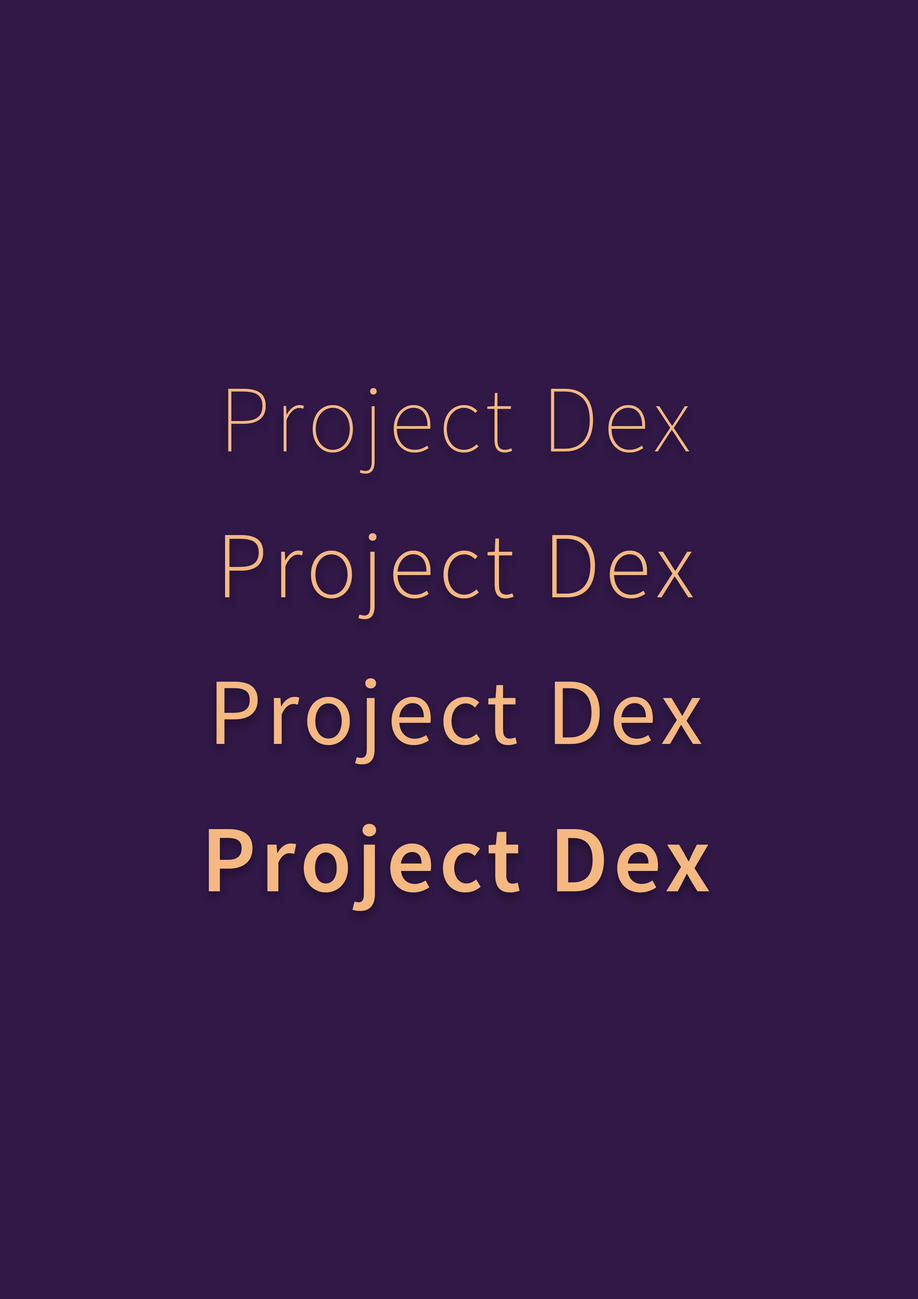
<style>
.page{position:relative;width:918px;height:1299px;background:#311847}
.page>*{position:absolute;margin:0}
.t1{font:94.8px "SourceSansPro-ExtraLight";letter-spacing:0.05em;color:#f5b880}
.t2{font:94.8px "SourceSansPro-Light";letter-spacing:0.05em;color:#f5b880}
.t3{font:94.8px "SourceSansPro-Regular";letter-spacing:0.05em;color:#f5b880}
.t4{font:94.8px "SourceSansPro-Semibold";letter-spacing:0.05em;color:#f5b880}
</style>
<div class="page">
<p class="t1" style="left:228px;top:388px;width:461px;height:86px">Project Dex</p>
<p class="t2" style="left:225px;top:533px;width:468px;height:86px">Project Dex</p>
<p class="t3" style="left:217px;top:678px;width:485px;height:87px">Project Dex</p>
<p class="t4" style="left:209px;top:824px;width:500px;height:87px">Project Dex</p>
</div>
